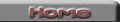
<style>
.page{position:relative;width:120px;height:22px;background:#828282}
.page>*{position:absolute;margin:0}
.t1{font:16px "Axaxaxregular";color:#8b4e4e;scale:1.5 1}
</style>
<div class="page">
<p class="t1" style="left:30px;top:7px;width:60px;height:10px">Home</p>
</div>
